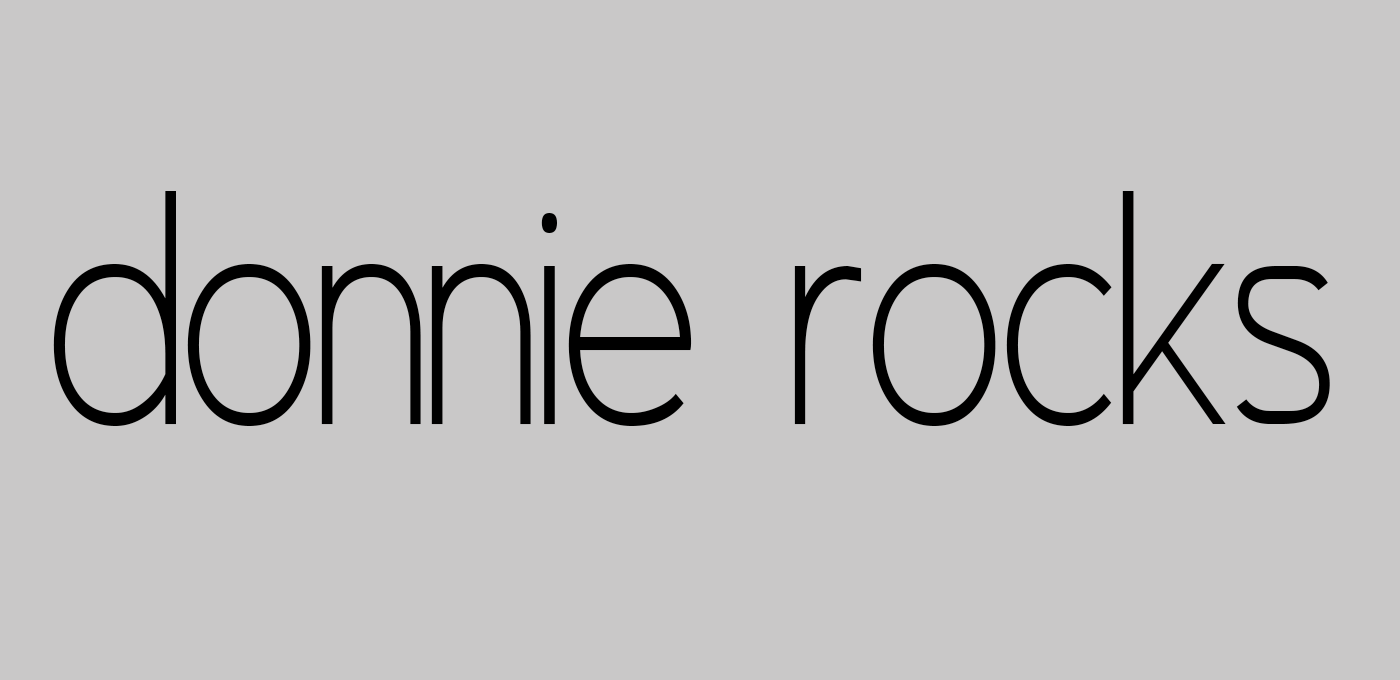
<style>
.page{position:relative;width:1400px;height:680px;background:#c9c8c8}
.page>*{position:absolute;margin:0}
.t1{font:400px "AsenineThin";color:#000000}
</style>
<div class="page">
<p class="t1" style="left:53px;top:191px;width:1277px;height:235px">donnie rocks</p>
</div>
